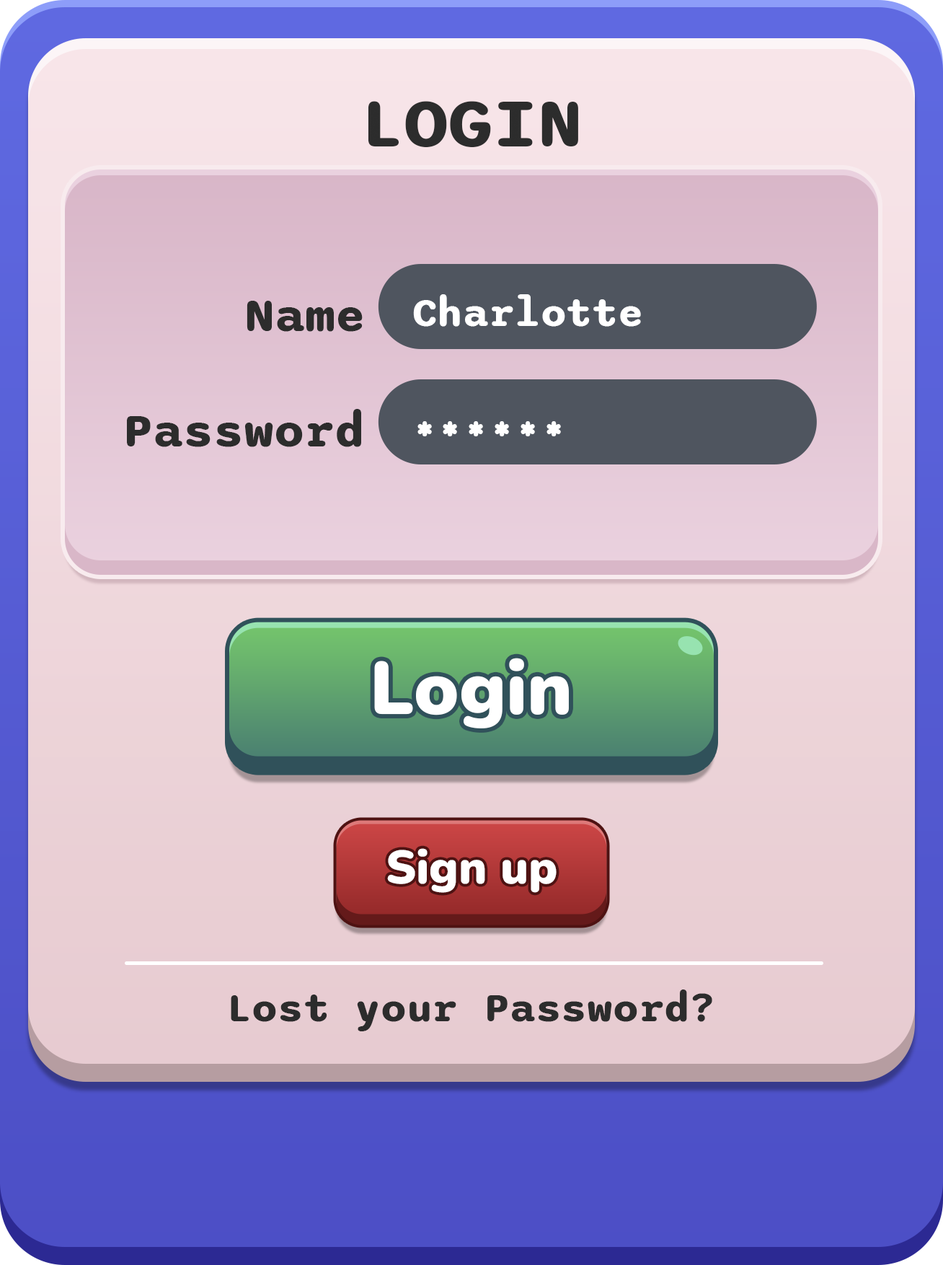
<style>
.page{position:relative;width:943px;height:1265px}
.page>*{position:absolute;margin:0}
.t1{font:72.1px "Sono-Bold";color:#2c2c2c}
.t2{font:49px "Sono-Bold";color:#2c2c2c}
.t3{font:41.7px "Sono-Bold";color:#ffffff}
.t4{font:75px "Nunito-Black";color:#ffffff}
.t5{font:46.9px "Nunito-Black";color:#ffffff}
.t6{font:41.7px "Sono-Bold";color:#2c2c2c}
</style>
<div class="page">
<p class="t1" style="left:368px;top:101px;width:210px;height:46px">LOGIN</p>
<p class="t2" style="left:247px;top:301px;width:116px;height:31px">Name</p>
<p class="t3" style="left:413px;top:294px;width:228px;height:33px">Charlotte</p>
<p class="t2" style="left:127px;top:409px;width:234px;height:38px">Password</p>
<p class="t3" style="left:417px;top:421px;width:144px;height:15px">******</p>
<p class="t4" style="left:374px;top:657px;width:195px;height:71px">Login</p>
<p class="t5" style="left:387px;top:848px;width:170px;height:45px">Sign up</p>
<p class="t6" style="left:231px;top:989px;width:481px;height:42px">Lost your Password?</p>
</div>
